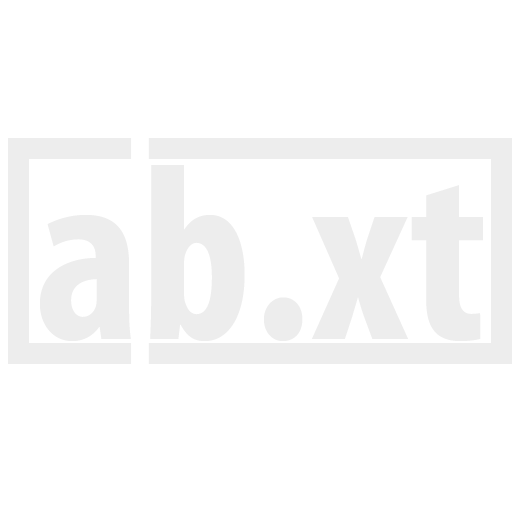
<style>
.page{position:relative;width:512px;height:512px;background:#ffffff}
.page>*{position:absolute;margin:0}
.t1{font:250px "MyriadPro-BoldCond";color:#ededed}
</style>
<div class="page">
<p class="t1" style="left:40px;top:165px;width:443px;height:176px">ab.xt</p>
</div>
